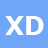
<style>
.page{position:relative;width:48px;height:48px;background:#6fa6f7}
.page>*{position:absolute;margin:0}
.t1{font:25px "Verdana-Bold";color:#ffffff}
</style>
<div class="page">
<p class="t1" style="left:5px;top:16px;width:39px;height:19px">XD</p>
</div>
